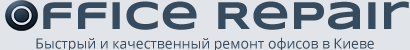
<style>
.page{position:relative;width:410px;height:50px;background:#e1e5ea}
.page>*{position:absolute;margin:0}
.t1{font:40px "Syncopate-Bold";color:#374b5e}
.t2{font:14px "OpenSans";color:#374b5e}
</style>
<div class="page">
<p class="t1" style="left:43px;top:1px;width:366px;height:29px">ffice Repair</p>
<p class="t2" style="left:36px;top:37px;width:338px;height:15px">Быстрый и качественный ремонт офисов в Киеве</p>
</div>
